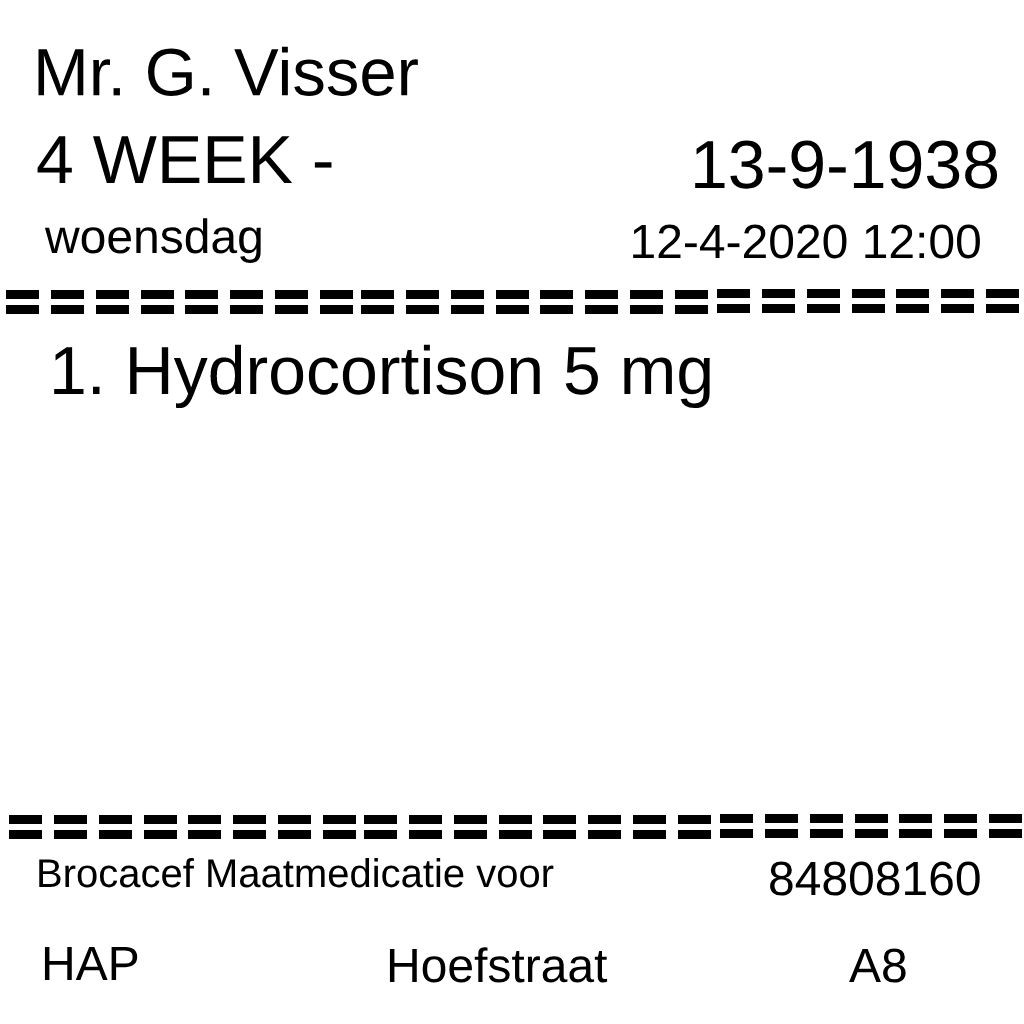
<style>
.page{position:relative;width:1024px;height:1024px;background:#ffffff}
.page>*{position:absolute;margin:0}
.t1{font:67px "Arimo-Regular";color:#000000}
.t2{font:68px "Arimo-Regular";color:#000000}
.t3{font:48px "Arimo-Regular";color:#000000}
.t4{font:40px "Arimo-Regular";color:#000000}
</style>
<div class="page">
<p class="t1" style="left:38px;top:46px;width:380px;height:50px">Mr. G. Visser</p>
<p class="t2" style="left:37px;top:136px;width:295px;height:47px">4 WEEK -</p>
<p class="t2" style="left:695px;top:140px;width:303px;height:49px">13-9-1938</p>
<p class="t3" style="left:44px;top:218px;width:217px;height:45px">woensdag</p>
<p class="t3" style="left:633px;top:224px;width:347px;height:35px">12-4-2020 12:00</p>
<p class="t2" style="left:54px;top:344px;width:656px;height:65px">1. Hydrocortison 5 mg</p>
<p class="t4" style="left:39px;top:858px;width:515px;height:30px">Brocacef Maatmedicatie voor</p>
<p class="t3" style="left:770px;top:861px;width:210px;height:35px">84808160</p>
<p class="t3" style="left:44px;top:946px;width:94px;height:34px">HAP</p>
<p class="t3" style="left:389px;top:947px;width:219px;height:36px">Hoefstraat</p>
<p class="t3" style="left:849px;top:948px;width:57px;height:35px">A8</p>
</div>
